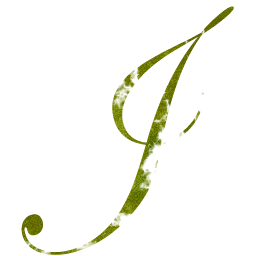
<style>
.page{position:relative;width:256px;height:256px;background:#ffffff}
.page>*{position:absolute;margin:0}
.t1{font:282px "EdwardianScriptITC"}
</style>
<div class="page">
<p class="t1" style="left:21px;top:6px;width:213px;height:249px;rotate:-17deg">I</p>
</div>
